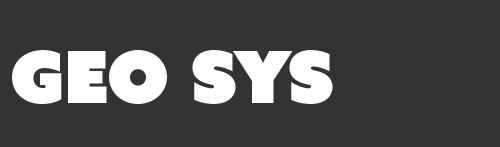
<style>
.page{position:relative;width:500px;height:147px;background:#333333}
.page>*{position:absolute;margin:0}
.t1{font:72px "AzoSansUber-Regular";color:#ffffff}
</style>
<div class="page">
<p class="t1" style="left:12px;top:50px;width:321px;height:54px">GEO SYS</p>
</div>
